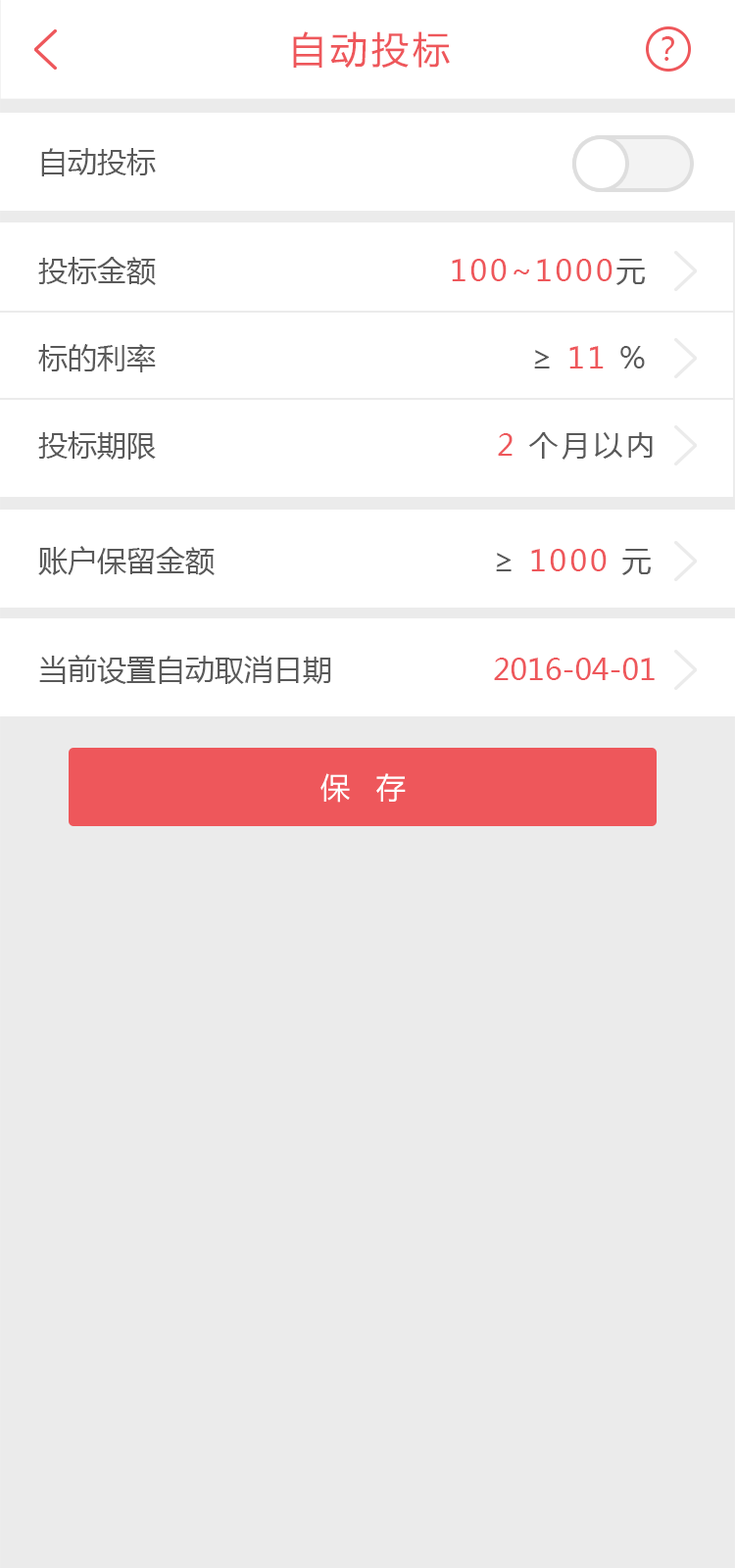
<style>
.page{position:relative;width:735px;height:1568px;background:#ebebeb}
.page>*{position:absolute;margin:0}
.t1{font:37.2px "MicrosoftYaHei";letter-spacing:0.1em;color:#ee575b}
.t2{font:31.7px "MicrosoftYaHei";letter-spacing:0.1em;color:#ee575b}
.t3{font:29.4px "MicrosoftYaHei";color:#595959}
.t4{font:29.4px "MicrosoftYaHei";letter-spacing:0.1em;color:#ee575b}
.t5{font:29.4px "MicrosoftYaHei";letter-spacing:0.1em;color:#595959}
.t6{font:29.4px "MicrosoftYaHei";color:#ee575b}
.t7{font:29.4px "MicrosoftYaHei";letter-spacing:0.1em;color:#ffffff}
</style>
<div class="page">
<p class="t1" style="left:293px;top:31px;width:157px;height:37px">自动投标</p>
<p class="t2" style="left:662px;top:36px;width:12px;height:25px">？</p>
<p class="t3" style="left:41px;top:148px;width:115px;height:28px">自动投标</p>
<p class="t3" style="left:38px;top:257px;width:118px;height:28px">投标金额</p>
<p class="t4" style="left:452px;top:259px;width:194px;height:26px">100~1000<span class="t5">元</span></p>
<p class="t3" style="left:38px;top:344px;width:118px;height:28px">标的利率</p>
<p class="t4" style="left:534px;top:346px;width:111px;height:22px"><span class="t5">≥ </span>11 <span class="t5">%</span></p>
<p class="t3" style="left:38px;top:431px;width:118px;height:29px">投标期限</p>
<p class="t5" style="left:498px;top:432px;width:155px;height:28px"><span class="t4">2 </span>个月以内</p>
<p class="t3" style="left:38px;top:546px;width:177px;height:29px">账户保留金额</p>
<p class="t4" style="left:496px;top:549px;width:156px;height:26px"><span class="t5">≥ </span>1000 <span class="t5">元</span></p>
<p class="t3" style="left:39px;top:655px;width:292px;height:29px">当前设置自动取消日期</p>
<p class="t6" style="left:494px;top:658px;width:161px;height:22px">2016-04-01</p>
<p class="t7" style="left:320px;top:773px;width:86px;height:30px">保  存</p>
</div>
